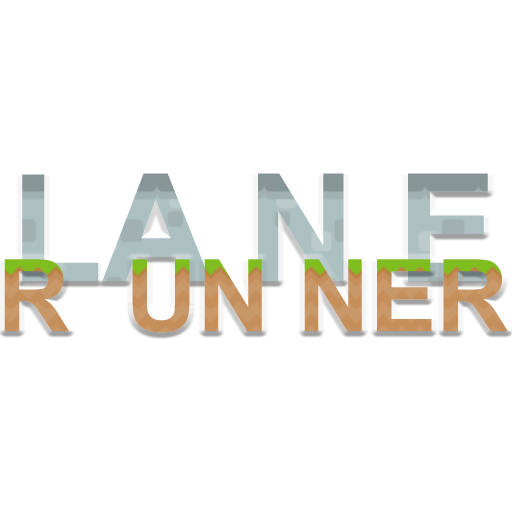
<style>
.page{position:relative;width:512px;height:512px;background:#ffffff}
.page>*{position:absolute;margin:0}
.t1{font:150px "Arial-BoldMT";color:#acc0c1}
.t2{font:100px "Arial-BoldMT";color:#c5955c}
</style>
<div class="page">
<p class="t1" style="left:22px;top:173px;width:468px;height:108px">LA N E</p>
<p class="t2" style="left:4px;top:259px;width:504px;height:74px">R  UN NER</p>
</div>
